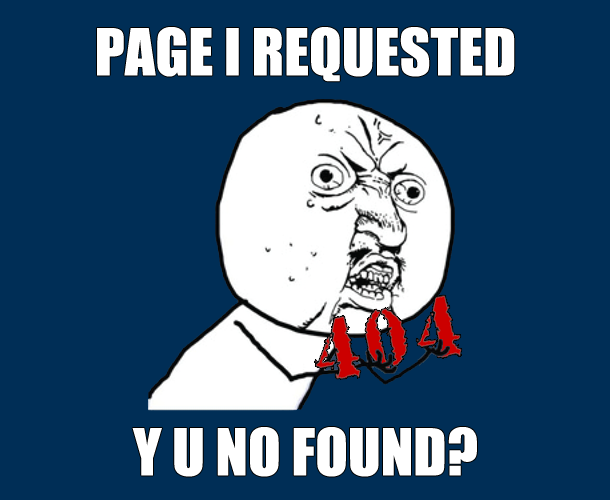
<style>
.page{position:relative;width:610px;height:500px;background:#002e56}
.page>*{position:absolute;margin:0}
.t1{font:60px "Impact";color:#ffffff}
</style>
<div class="page">
<p class="t1" style="left:97px;top:27px;width:418px;height:55px">PAGE I REQUESTED</p>
<p class="t1" style="left:132px;top:427px;width:345px;height:50px">Y U NO FOUND?</p>
</div>
